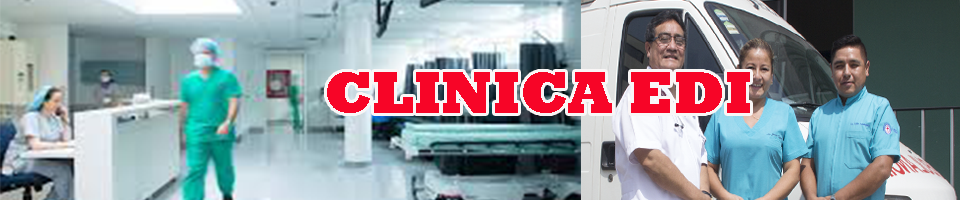
<style>
.page{position:relative;width:960px;height:200px}
.page>*{position:absolute;margin:0}
.t1{font:60px "Rockwell-ExtraBold";color:#f70527}
</style>
<div class="page">
<p class="t1" style="left:327px;top:72px;width:423px;height:41px">CLINICA EDI</p>
</div>
